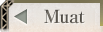
<style>
.page{position:relative;width:103px;height:32px}
.page>*{position:absolute;margin:0}
.t1{font:18px "RyuminPro-ExBold";letter-spacing:-0.04em;color:#65615a}
</style>
<div class="page">
<p class="t1" style="left:44px;top:9px;width:41px;height:15px">Muat</p>
</div>
